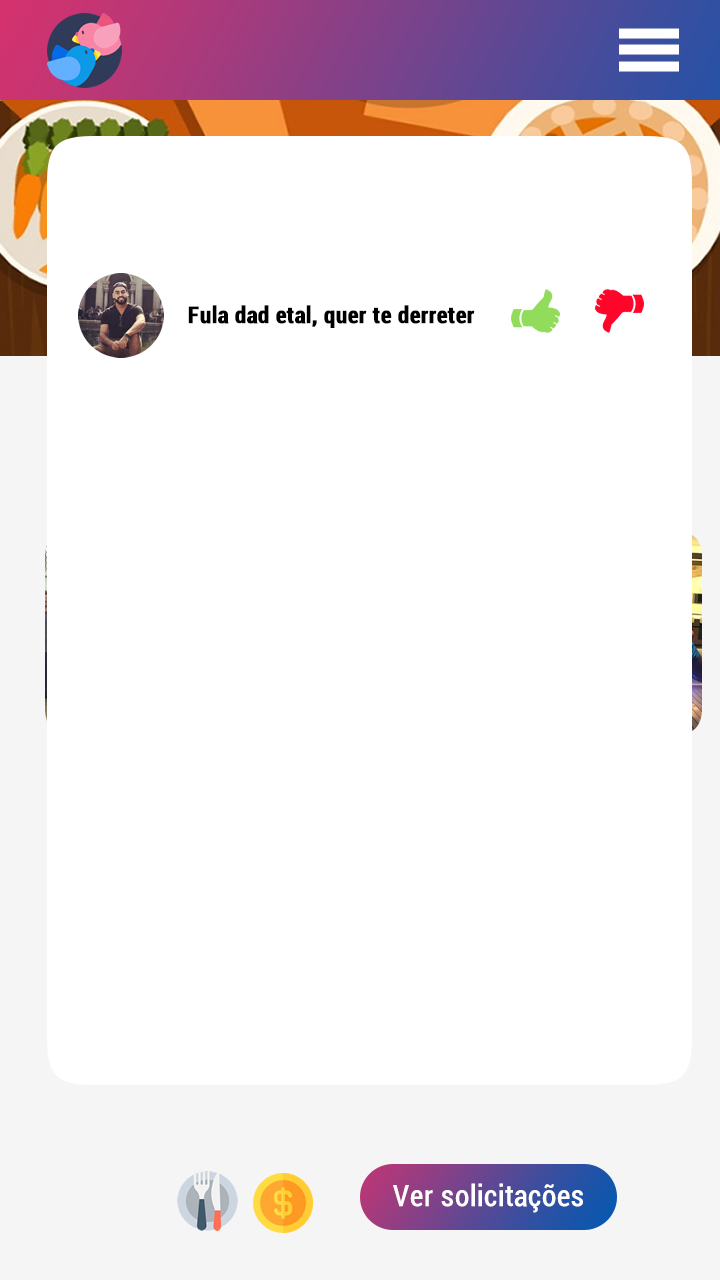
<style>
.page{position:relative;width:720px;height:1280px;background:#ffffff}
.page>*{position:absolute;margin:0}
.t1{font:23px "Roboto-BoldCondensed";color:#000000;font-weight:bold}
.t2{font:29px "Roboto-Condensed";color:#ffffff;font-weight:bold}
</style>
<div class="page">
<p class="t1" style="left:188px;top:305px;width:287px;height:23px">Fula dad etal, quer te derreter</p>
<p class="t2" style="left:393px;top:1183px;width:190px;height:30px">Ver solicitações</p>
</div>
